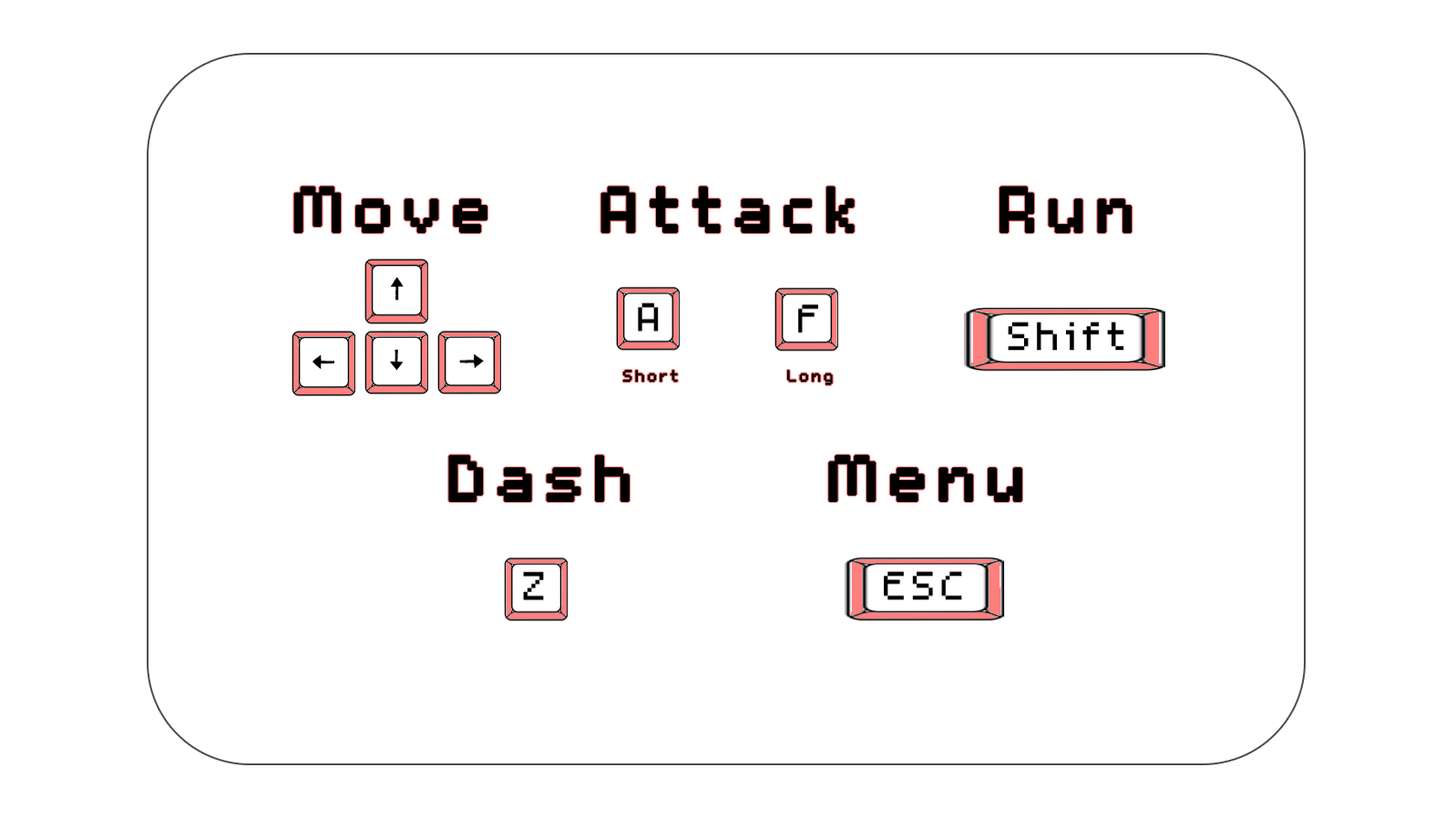
<style>
.page{position:relative;width:1456px;height:819px;background:#ffffff}
.page>*{position:absolute;margin:0}
.t1{font:101.2px "m5x7";letter-spacing:0.08em;color:#000000;font-weight:bold}
.t2{font:25.3px "m5x7";letter-spacing:0.08em;color:#000000;font-weight:bold}
</style>
<div class="page">
<p class="t1" style="left:293px;top:186px;width:194px;height:47px">Move</p>
<p class="t1" style="left:600px;top:186px;width:255px;height:47px">Attack</p>
<p class="t1" style="left:999px;top:186px;width:133px;height:47px">Run</p>
<p class="t2" style="left:622px;top:370px;width:211px;height:15px">Short          Long</p>
<p class="t1" style="left:448px;top:455px;width:182px;height:47px">Dash</p>
</div>
